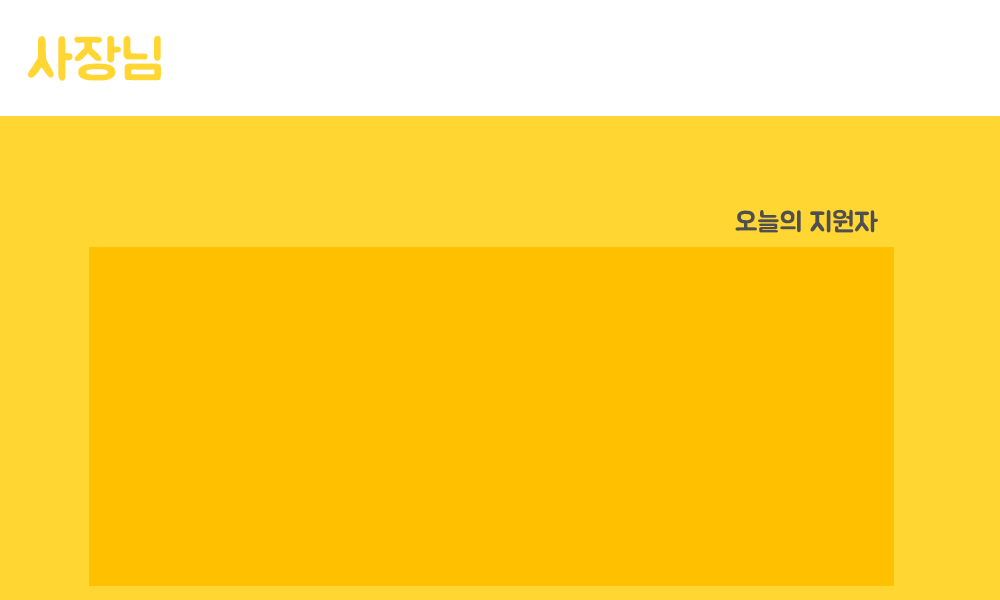
<style>
.page{position:relative;width:1000px;height:600px;background:#ffc000}
.page>*{position:absolute;margin:0}
.t1{font:55.6px "BMJUA";color:#ffd632}
.t2{font:27.6px "BMJUA";color:#4f4f4f}
</style>
<div class="page">
<p class="t1" style="left:28px;top:35px;width:133px;height:46px">사장님</p>
<p class="t2" style="left:735px;top:209px;width:143px;height:24px">오늘의 지원자</p>
</div>
